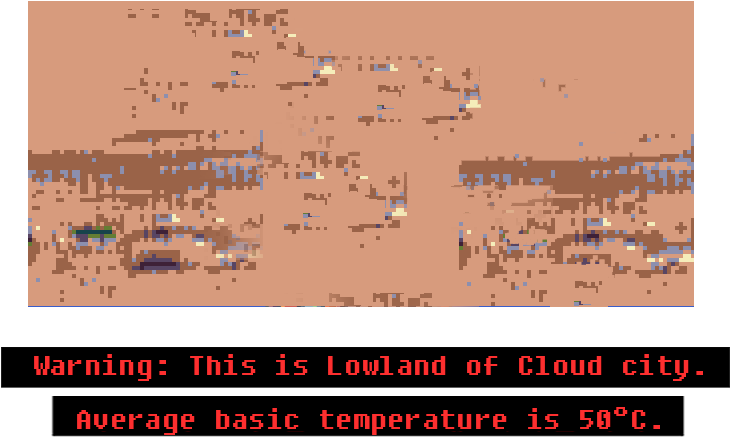
<style>
.page{position:relative;width:731px;height:438px;background:#d79b7d}
.page>*{position:absolute;margin:0}
.t1{font:34.7px/53.3px "DungGeunMo";color:#fd2f2f}
</style>
<div class="page">
<p class="t1" style="left:34px;top:354px;width:669px;height:81px;text-align:center">Warning: This is Lowland of Cloud city.<br>Average basic temperature is 50°C.</p>
</div>
